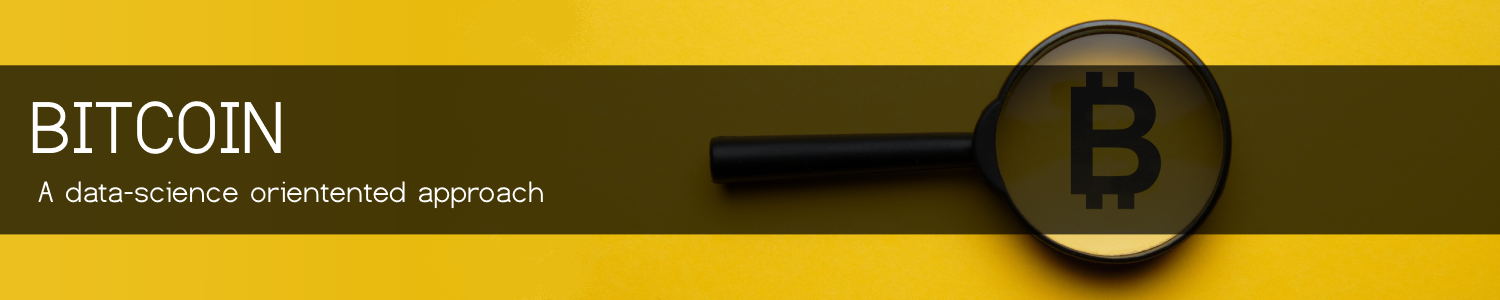
<style>
.page{position:relative;width:1500px;height:300px}
.page>*{position:absolute;margin:0}
.t1{font:77px "Dustismo";color:#ffffff}
.t2{font:31px "Dustismo";color:#ffffff}
</style>
<div class="page">
<p class="t1" style="left:32px;top:101px;width:249px;height:53px">BITCOIN</p>
<p class="t2" style="left:38px;top:181px;width:505px;height:28px">A data-science orientented approach</p>
</div>
